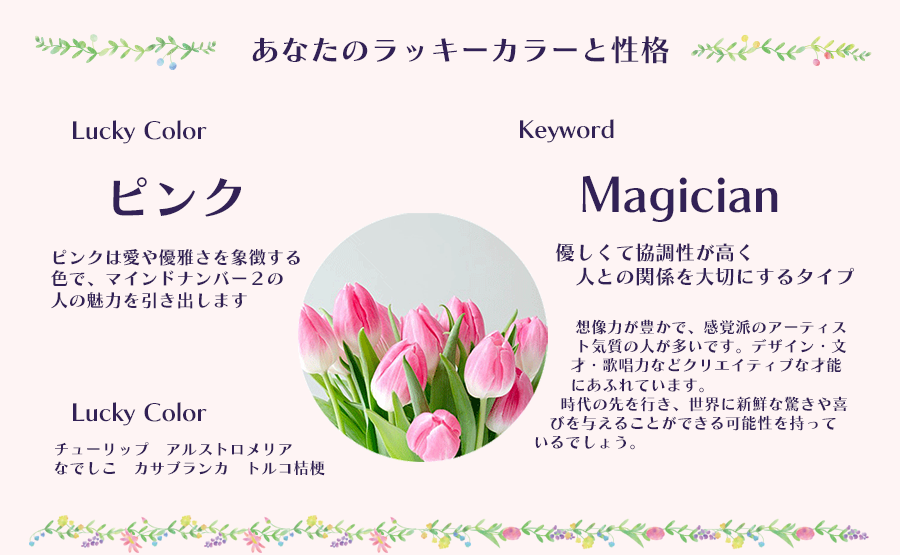
<style>
.page{position:relative;width:900px;height:556px;background:#fef4f4}
.page>*{position:absolute;margin:0}
.t1{font:30px "ChiaroStd-B";color:#322156}
.t2{font:24px "ChiaroStd-B";color:#322156}
.t3{font:48px "ChiaroStd-B";color:#322156}
.t4{font:20px "ChiaroStd-B";color:#322156}
.t5{font:18px "ChiaroStd-B";color:#322156}
.t6{font:16px "ChiaroStd-B";color:#322156}
</style>
<div class="page">
<p class="t1" style="left:252px;top:36px;width:417px;height:28px">あなたのラッキーカラーと性格</p>
<p class="t2" style="left:73px;top:120px;width:134px;height:24px">Lucky Color</p>
<p class="t2" style="left:520px;top:119px;width:94px;height:24px">Keyword</p>
<p class="t3" style="left:113px;top:177px;width:128px;height:40px">ピンク</p>
<p class="t3" style="left:582px;top:175px;width:196px;height:47px">Magician</p>
<p class="t4" style="left:555px;top:243px;width:299px;height:43px">優しくて協調性が高く<br>　人との関係を大切にするタイプ</p>
<p class="t5" style="left:51px;top:249px;width:249px;height:60px">ピンクは愛や優雅さを象徴する<br>色で、マインドナンバー２の<br>人の魅力を引き出します</p>
<p class="t6" style="left:535px;top:319px;width:313px;height:131px">想像力が豊かで、感覚派のアーティス　　 　　  ト気質の人が多いです。デザイン・文　 　　　 才・歌唱力などクリエイティブな才能　　　　  にあふれています。<br>　　　　時代の先を行き、世界に新鮮な驚きや喜　　　 びを与えることができる可能性を持って　　 いるでしょう。</p>
<p class="t2" style="left:73px;top:402px;width:134px;height:24px">Lucky Color</p>
<p class="t6" style="left:54px;top:442px;width:271px;height:34px">チューリップ　アルストロメリア<br>なでしこ　カサブランカ　トルコ桔梗</p>
</div>
